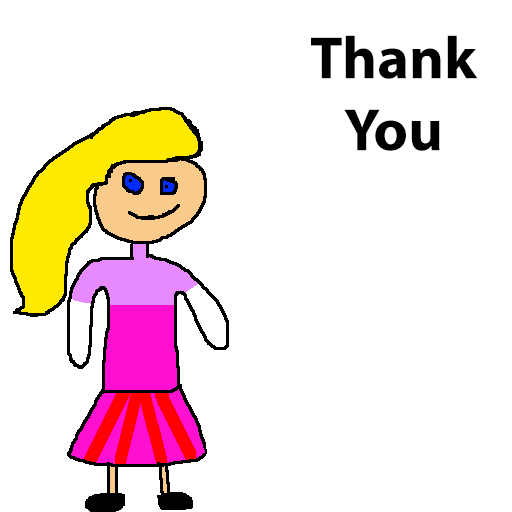
<style>
.page{position:relative;width:512px;height:512px;background:#ffffff}
.page>*{position:absolute;margin:0}
.t1{font:60px "MyriadPro-Bold";color:#000000}
</style>
<div class="page">
<p class="t1" style="left:311px;top:35px;width:167px;height:116px;text-align:center">Thank You</p>
</div>
